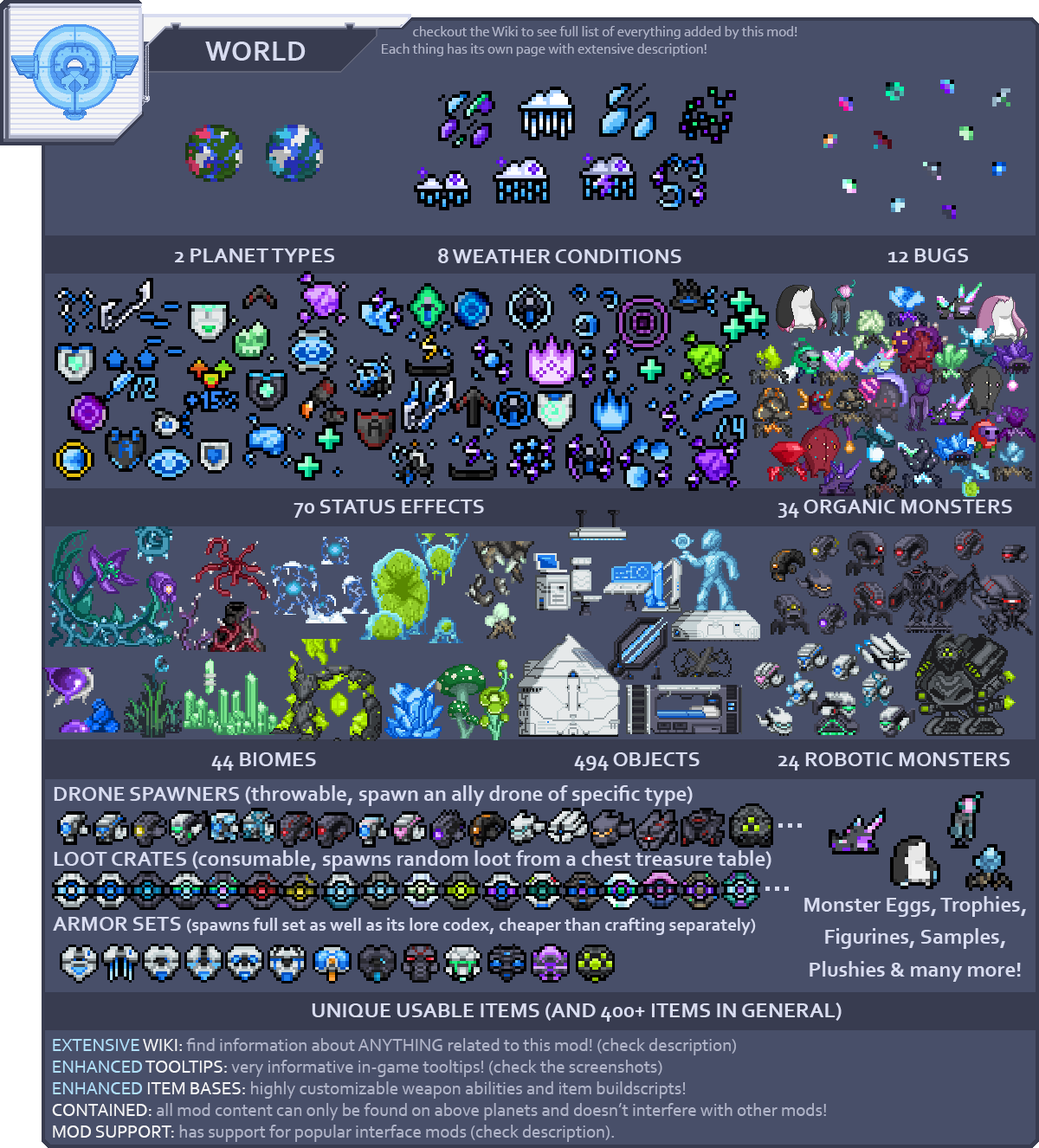
<style>
.page{position:relative;width:1039px;height:1148px;background:#484f69}
.page>*{position:absolute;margin:0}
.t1{font:14.4px "Corbel";color:#b0b4c8}
.t2{font:28.9px "Corbel-Bold";color:#d8dcf0}
.t3{font:21.6px "Corbel-Bold";color:#d8dcf0}
.t4{font:21.6px/32.5px "Corbel-Bold";color:#d8dcf0}
.t5{font:18px/32.5px "Corbel-Bold";color:#d8dcf0}
.t6{font:18px "Corbel";color:#b0b4c8}
.t7{font:18px "Corbel";color:#b0e0fc}
.t8{font:18px "Corbel";color:#f6f6f6}
</style>
<div class="page">
<p class="t1" style="left:382px;top:26px;width:415px;height:30px">checkout the Wiki to see full list of everything added by this mod!<br>Each thing has its own page with extensive description!</p>
<p class="t2" style="left:205px;top:42px;width:101px;height:19px">WORLD</p>
<p class="t3" style="left:175px;top:248px;width:159px;height:14px">2 PLANET TYPES</p>
<p class="t3" style="left:438px;top:248px;width:243px;height:15px">8 WEATHER CONDITIONS</p>
<p class="t3" style="left:888px;top:248px;width:80px;height:14px">12 BUGS</p>
<p class="t3" style="left:293px;top:499px;width:191px;height:19px">70 STATUS EFFECTS</p>
<p class="t3" style="left:777px;top:499px;width:235px;height:19px">34 ORGANIC MONSTERS</p>
<p class="t3" style="left:211px;top:752px;width:105px;height:18px">44 BIOMES</p>
<p class="t3" style="left:574px;top:752px;width:125px;height:18px">494 OBJECTS</p>
<p class="t3" style="left:778px;top:752px;width:231px;height:18px">24 ROBOTIC MONSTERS</p>
<p class="t4" style="left:53px;top:785px;width:718px;height:150px">DRONE SPAWNERS (throwable, spawn an ally drone of specific type)<br><br>LOOT CRATES (consumable, spawns random loot from a chest treasure table)<br><br>ARMOR SETS <span class="t5">(spawns full set as well as its lore codex, cheaper than crafting separately)</span></p>
<p class="t4" style="left:804px;top:896px;width:222px;height:86px;text-align:center">Monster Eggs, Trophies,<br>Figurines, Samples,<br>Plushies &amp; many more!</p>
<p class="t3" style="left:312px;top:1002px;width:529px;height:19px">UNIQUE USABLE ITEMS (AND 400+ ITEMS IN GENERAL)</p>
<p class="t6" style="left:52px;top:1038px;width:774px;height:104px"><span class="t7">EXTENSIVE</span><span class="t8"> WIKI:</span> find information about ANYTHING related to this mod! (check description) <br><span class="t7">ENHANCED</span><span class="t8"> TOOLTIPS:</span> very informative in-game tooltips! (check the screenshots)<br><span class="t7">ENHANCED</span><span class="t8"> ITEM BASES:</span> highly customizable weapon abilities and item buildscripts!<br><span class="t8">CONTAINED:</span> all mod content can only be found on above planets and doesn’t interfere with other mods!<br><span class="t8">MOD SUPPORT:</span> has support for popular interface mods (check description).</p>
</div>
